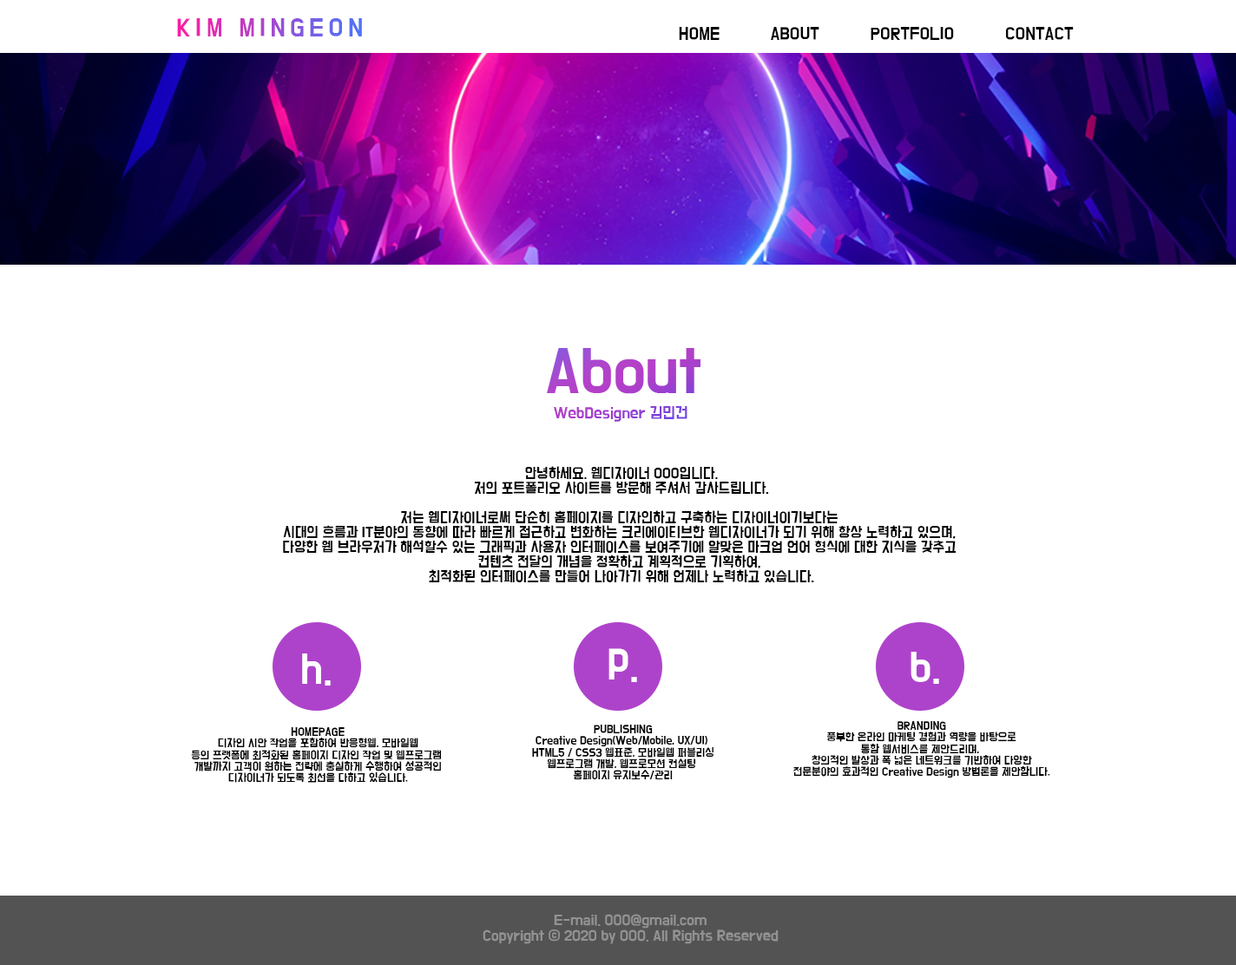
<style>
.page{position:relative;width:1236px;height:965px;background:#ffffff}
.page>*{position:absolute;margin:0}
.t1{font:21px "BMDoHyeon";letter-spacing:0.22em}
.t2{font:21px "BMDoHyeon";letter-spacing:0.24em}
.t3{font:14.5px "BMDoHyeon";color:#000000}
.t4{font:53.7px "BMDoHyeon";color:#ac40cb}
.t5{font:13.3px "BMDoHyeon"}
.t6{font:12.3px "BMDoHyeon";color:#000000}
.t7{font:36px "BMDoHyeon";color:#ffffff}
.t8{font:9.5px "BMDoHyeon";color:#000000}
.t9{font:12.6px "BMDoHyeon";color:#929292}
</style>
<div class="page">
<p class="t1" style="left:177px;top:18px;width:185px;height:18px"><span class="t2">KIM </span>MINGEON</p>
<p class="t3" style="left:679px;top:27px;width:40px;height:13px">HOME</p>
<p class="t3" style="left:771px;top:27px;width:48px;height:13px">ABOUT</p>
<p class="t3" style="left:870px;top:27px;width:84px;height:13px">PORTFOLIO</p>
<p class="t3" style="left:1006px;top:27px;width:67px;height:13px">CONTACT</p>
<p class="t4" style="left:547px;top:348px;width:153px;height:46px">About</p>
<p class="t5" style="left:554px;top:406px;width:133px;height:16px">WebDesigner 김민건</p>
<p class="t6" style="left:283px;top:466px;width:673px;height:116px;text-align:center">안녕하세요. 웹디자이너 000입니다.<br>저의 포트폴리오 사이트를 방문해 주셔서 감사드립니다.<br><br>저는 웹디자이너로써 단순히 홈페이지를 디자인하고 구축하는 디자이너이기보다는 <br>시대의 흐름과 IT분야의 동향에 따라 빠르게 접근하고 변화하는 크리에이티브한 웹디자이너가 되기 위해 항상 노력하고 있으며, <br>다양한 웹 브라우저가 해석할수 있는 그래픽과 사용자 인터페이스를 보여주기에 알맞은 마크업 언어 형식에 대한 지식을 갖추고 <br>컨텐츠 전달의 개념을 정확하고 계획적으로 기획하여, <br>최적화된 인터페이스를 만들어 나아가기 위해 언제나 노력하고 있습니다.</p>
<p class="t7" style="left:302px;top:653px;width:29px;height:33px">h.</p>
<p class="t7" style="left:608px;top:648px;width:29px;height:34px">p.</p>
<p class="t7" style="left:910px;top:652px;width:29px;height:32px">b.</p>
<p class="t8" style="left:532px;top:725px;width:181px;height:55px;text-align:center">PUBLISHING<br>Creative Design(Web/Mobile, UX/UI) <br>HTML5 / CSS3 웹표준, 모바일웹 퍼블리싱<br>웹프로그램 개발, 웹프로모션 컨설팅 <br>홈페이지 유지보수/관리</p>
<p class="t8" style="left:793px;top:721px;width:257px;height:57px;text-align:center">BRANDING<br>풍부한 온라인 마케팅 경험과 역량을 바탕으로<br>통합 웹서비스를 제안드리며, <br>창의적인 발상과 폭 넓은 네트워크를 기반하여 다양한<br>전문분야의 효과적인 Creative Design 방법론을 제안합니다.</p>
<p class="t8" style="left:191px;top:727px;width:251px;height:56px;text-align:center">HOMEPAGE<br>디자인 시안 작업을 포함하여 반응형웹, 모바일웹<br>등의 프랫폼에 최적화된 홈페이지 디자인 작업 및 웹프로그램 <br>개발까지 고객이 원하는 전략에 충실하게 수행하여 성공적인<br>디자이너가 되도록 최선을 다하고 있습니다.</p>
<p class="t9" style="left:482px;top:914px;width:296px;height:30px;text-align:center">E-mail. 000@gmail.com<br>Copyright ⓒ 2020 by 000. All Rights Reserved</p>
</div>
